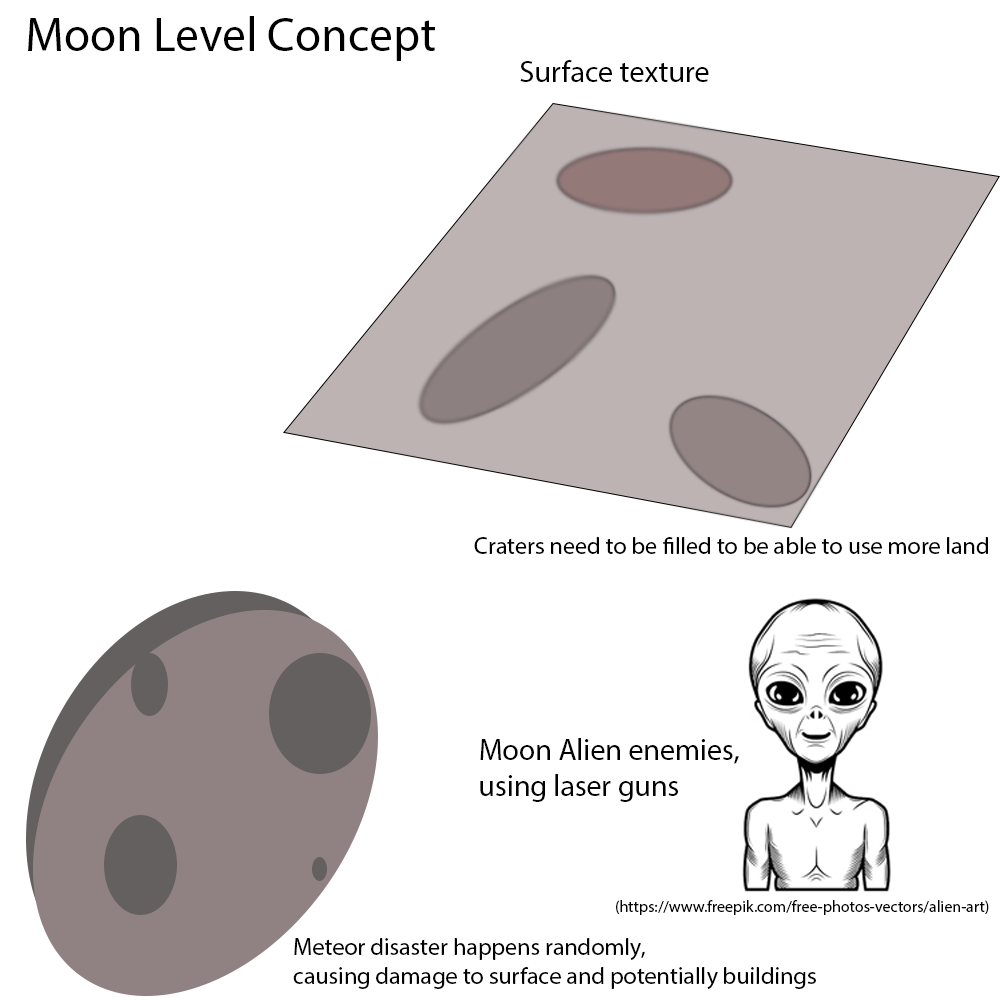
<style>
.page{position:relative;width:1000px;height:1000px;background:#ffffff}
.page>*{position:absolute;margin:0}
.t1{font:24px "MyriadPro-Regular";color:#000000}
.t2{font:29.9px "MyriadPro-Regular";color:#010101}
.t3{font:16px "MyriadPro-Regular";color:#010101}
.t4{font:24px "MyriadPro-Regular";color:#010101}
</style>
<div class="page">
<p class="t1" style="left:474px;top:537px;width:514px;height:17px">Craters need to be filled to be able to use more land</p>
<p class="t2" style="left:480px;top:738px;width:259px;height:64px">Moon Alien enemies, <br>using laser guns</p>
<p class="t3" style="left:616px;top:900px;width:373px;height:15px">(https://www.freepik.com/free-photos-vectors/alien-art)</p>
<p class="t4" style="left:293px;top:938px;width:523px;height:51px">Meteor disaster happens randomly, <br>causing damage to surface and potentially buildings</p>
</div>
